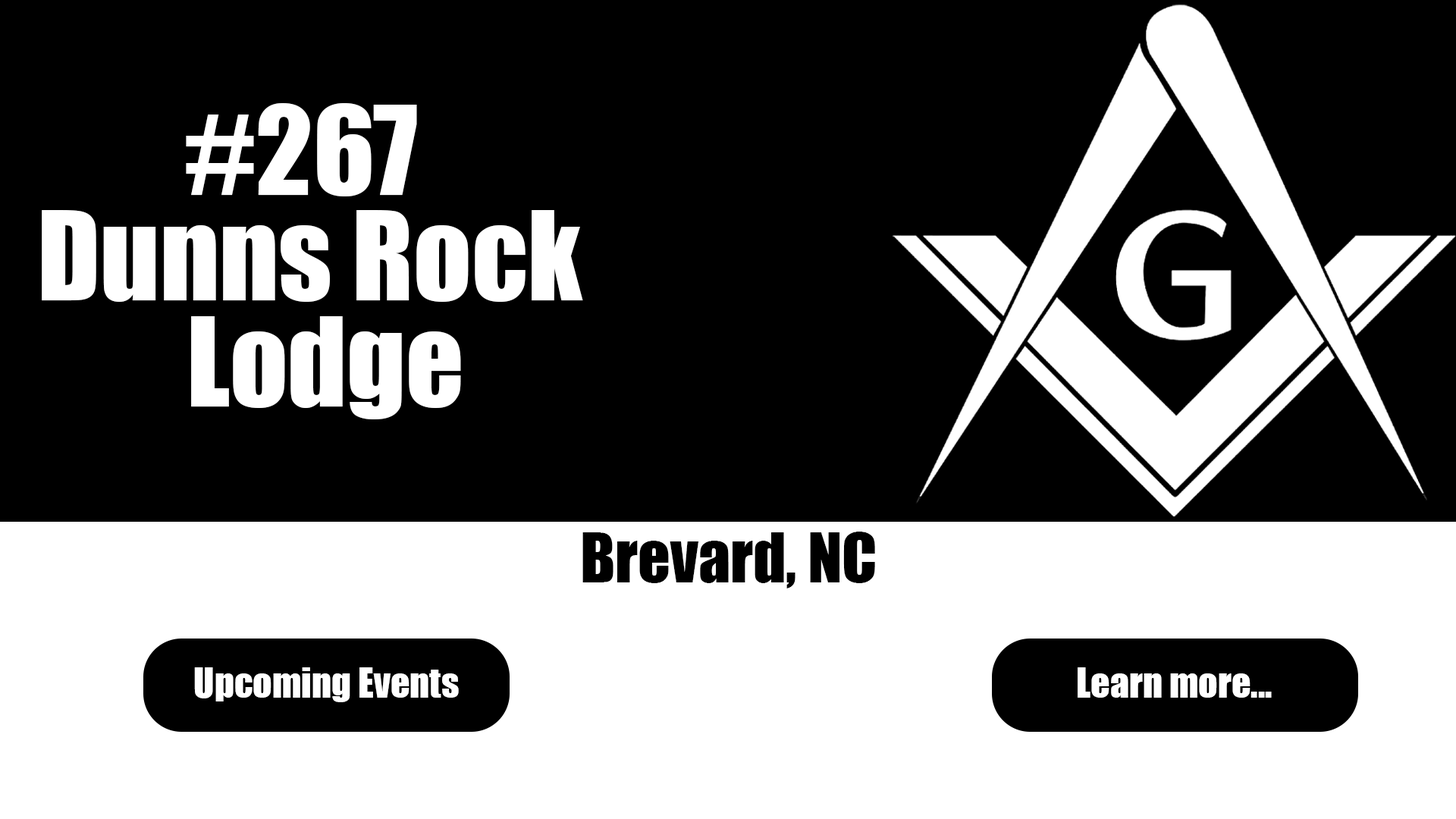
<style>
.page{position:relative;width:1456px;height:819px;background:#000000}
.page>*{position:absolute;margin:0}
.t1{font:113.7px "Impact";color:#ffffff}
.t2{font:63.4px "Impact";color:#000000}
.t3{font:37.9px "Impact";color:#ffffff}
</style>
<div class="page">
<p class="t1" style="left:186px;top:103px;width:231px;height:93px">#267</p>
<p class="t1" style="left:42px;top:210px;width:541px;height:92px">Dunns Rock</p>
<p class="t1" style="left:191px;top:316px;width:270px;height:103px">Lodge</p>
<p class="t2" style="left:582px;top:532px;width:293px;height:56px">Brevard, NC</p>
<p class="t3" style="left:194px;top:667px;width:265px;height:35px">Upcoming Events</p>
<p class="t3" style="left:1078px;top:667px;width:194px;height:31px">Learn more...</p>
</div>
